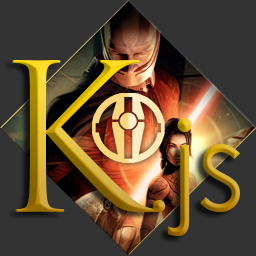
<style>
.page{position:relative;width:256px;height:256px;background:#333333}
.page>*{position:absolute;margin:0}
.t1{font:125px "CenturyGothic"}
.t2{font:200px "TrajanPro-Regular"}
.t3{font:100px "CenturyGothic"}
</style>
<div class="page">
<p class="t1" style="left:12px;top:60px;width:228px;height:176px"><span class="t2">K</span><span class="t3">.</span>js</p>
</div>
